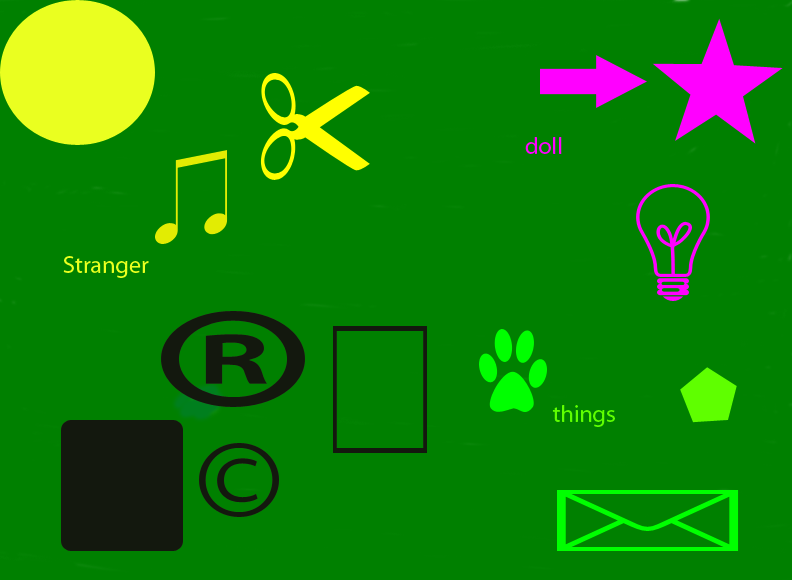
<style>
.page{position:relative;width:792px;height:580px;background:#008000}
.page>*{position:absolute;margin:0}
.t1{font:24px "MyriadPro-Regular";color:#ff00ff}
.t2{font:24px "MyriadPro-Regular";color:#eaff20}
.t3{font:24px "MyriadPro-Regular";color:#5fff00}
</style>
<div class="page">
<p class="t1" style="left:525px;top:137px;width:37px;height:17px">doll</p>
<p class="t2" style="left:63px;top:256px;width:86px;height:22px">Stranger things</p>
<p class="t3" style="left:552px;top:405px;width:63px;height:22px">things</p>
</div>
